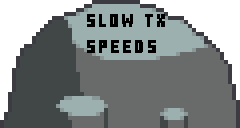
<style>
.page{position:relative;width:240px;height:128px;background:#696a6a}
.page>*{position:absolute;margin:0}
.t1{font:18.2px/26px "MinecraftTen";letter-spacing:0.2em;color:#000000;scale:0.86 1}
</style>
<div class="page">
<p class="t1" style="left:87px;top:14px;width:78px;height:39px">SLOW TX <br>SPEEDs</p>
</div>
